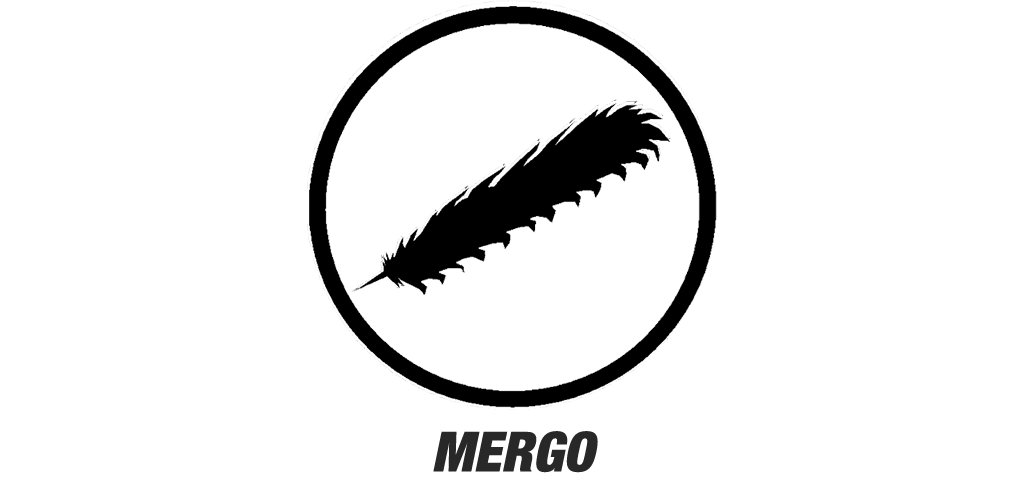
<style>
.page{position:relative;width:1024px;height:500px;background:#ffffff}
.page>*{position:absolute;margin:0}
.t1{font:55px "HelveticaNeueLTCom-BlkCnO";color:#282828}
</style>
<div class="page">
<p class="t1" style="left:433px;top:431px;width:165px;height:42px">MERGO</p>
</div>
